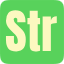
<style>
.page{position:relative;width:64px;height:64px;background:#58d25b}
.page>*{position:absolute;margin:0}
.t1{font:47px "Anton-Regular";color:#fcf8c0}
</style>
<div class="page">
<p class="t1" style="left:5px;top:10px;width:52px;height:42px">Str</p>
</div>
